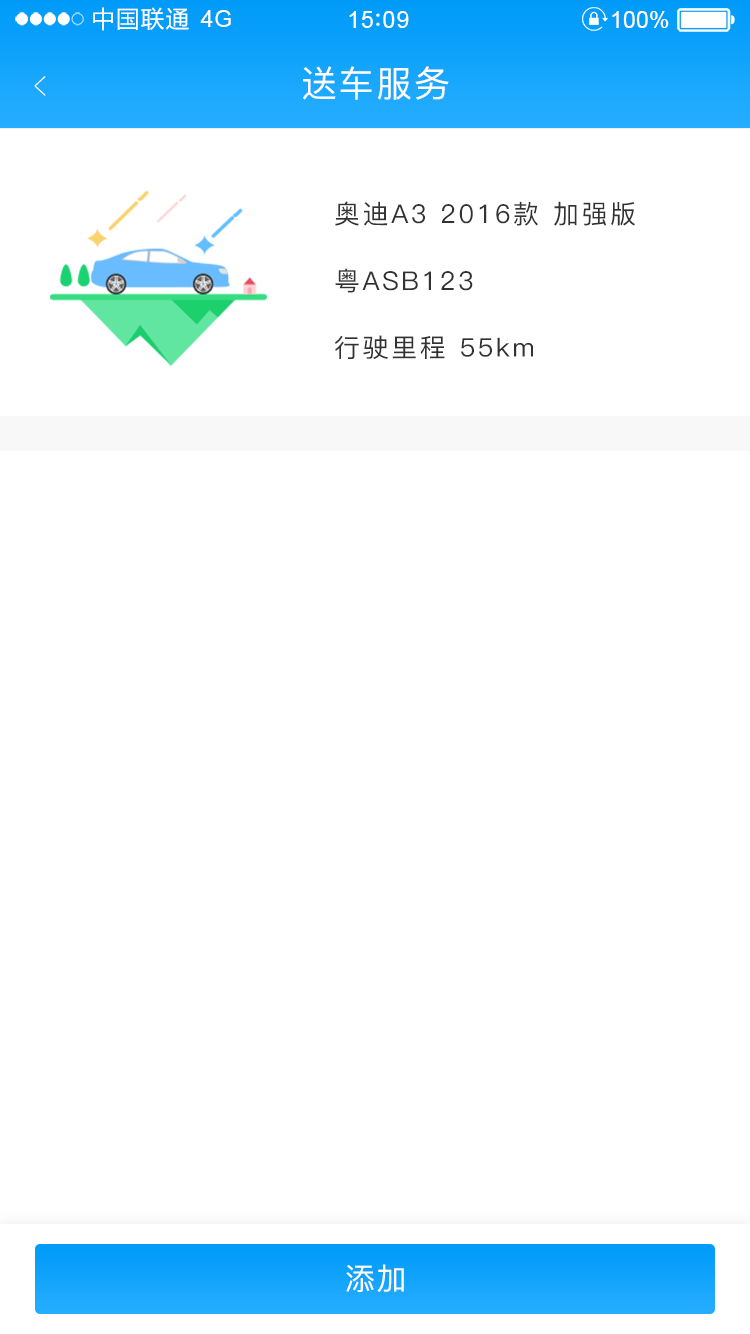
<style>
.page{position:relative;width:750px;height:1334px;background:#ffffff}
.page>*{position:absolute;margin:0}
.t1{font:23.4px "MicrosoftYaHei";letter-spacing:0.06em;color:#ffffff}
.t2{font:23.4px "ArialMT";letter-spacing:0.02em;color:#ffffff}
.t3{font:23.4px "ArialMT";letter-spacing:0.04em;color:#ffffff}
.t4{font:23.4px "ArialMT";color:#ffffff}
.t5{font:39px "PingFang-SC-ExtraLight";letter-spacing:0.1em;color:#ffffff;scale:0.51 1}
.t6{font:36px "PingFang-SC-Medium";letter-spacing:0.05em;color:#ffffff}
.t7{font:26px "PingFang-SC-Medium";letter-spacing:0.1em;color:#333333}
.t8{font:26px "PingFang-SC-Medium";letter-spacing:0.1em;color:#323232}
.t9{font:25.6px "PingFang-SC-Medium";letter-spacing:0.1em;color:#323232}
.t10{font:30px "PingFang-SC-Medium";letter-spacing:0.05em;color:#ffffff}
</style>
<div class="page">
<p class="t1" style="left:93px;top:7px;width:96px;height:24px">中国联通</p>
<p class="t2" style="left:200px;top:10px;width:31px;height:17px">4G</p>
<p class="t3" style="left:349px;top:11px;width:60px;height:17px">15 09</p>
<p class="t4" style="left:612px;top:11px;width:57px;height:17px">100%</p>
<p class="t5" style="left:34px;top:76px;width:12px;height:20px;rotate:180deg">&gt;</p>
<p class="t6" style="left:303px;top:66px;width:146px;height:34px">送车服务</p>
<p class="t7" style="left:335px;top:201px;width:300px;height:25px">奥迪A3 2016款 加强版</p>
<p class="t8" style="left:335px;top:268px;width:138px;height:25px">粤ASB123</p>
<p class="t9" style="left:335px;top:335px;width:198px;height:24px">行驶里程 55km</p>
<p class="t10" style="left:346px;top:1264px;width:58px;height:28px">添加</p>
</div>
